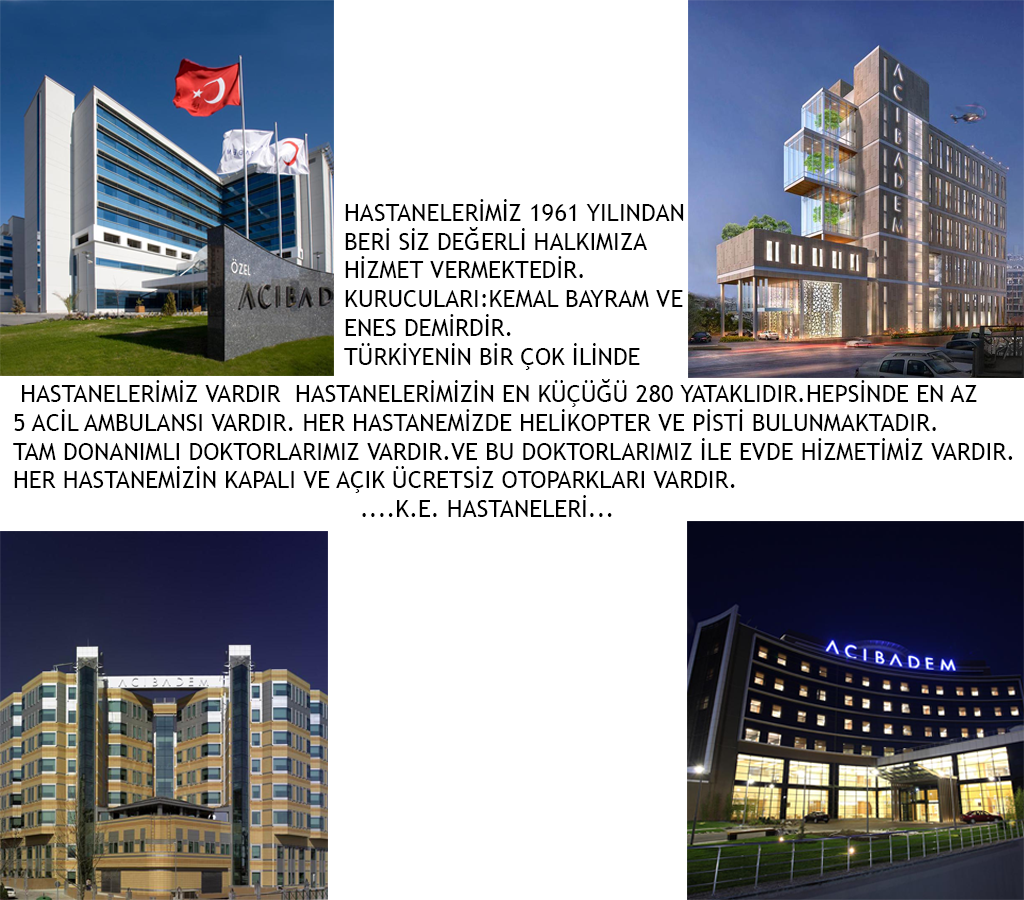
<style>
.page{position:relative;width:1024px;height:900px;background:#ffffff}
.page>*{position:absolute;margin:0}
.t1{font:24px "TrebuchetMS";color:#000000}
</style>
<div class="page">
<p class="t1" style="left:344px;top:199px;width:340px;height:171px">HASTANELERİMİZ 1961 YILINDAN<br>BERİ SİZ DEĞERLİ HALKIMIZA <br>HİZMET VERMEKTEDİR. <br>KURUCULARI:KEMAL BAYRAM VE<br>ENES DEMİRDİR. <br>TÜRKİYENİN BİR ÇOK İLİNDE</p>
<p class="t1" style="left:13px;top:379px;width:1000px;height:138px">HASTANELERİMİZ VARDIR  HASTANELERİMİZİN EN KÜÇÜĞÜ 280 YATAKLIDIR.HEPSİNDE EN AZ <br>5 ACİL AMBULANSI VARDIR. HER HASTANEMİZDE HELİKOPTER VE PİSTİ BULUNMAKTADIR.<br>TAM DONANIMLI DOKTORLARIMIZ VARDIR.VE BU DOKTORLARIMIZ İLE EVDE HİZMETİMİZ VARDIR.<br>HER HASTANEMİZİN KAPALI VE AÇIK ÜCRETSİZ OTOPARKLARI VARDIR.<br>                                                ....K.E. HASTANELERİ...</p>
</div>
